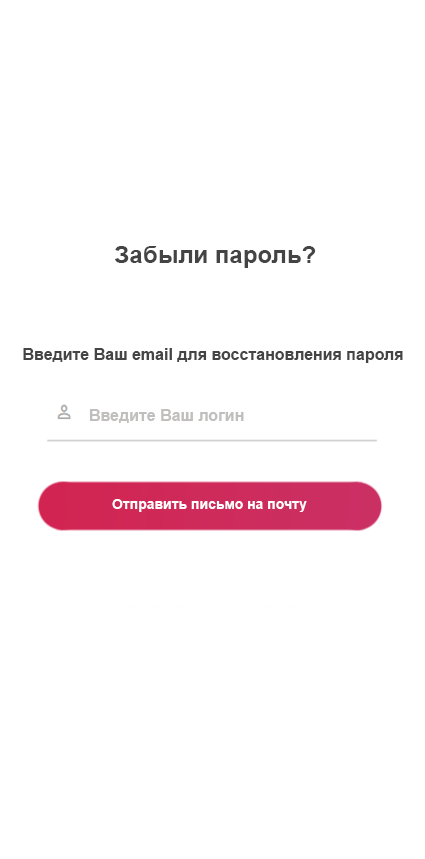
<style>
.page{position:relative;width:425px;height:859px;background:#ffffff}
.page>*{position:absolute;margin:0}
.t1{font:24px "Arial-BoldMT";color:#444444}
.t2{font:16px "Arial-BoldMT";color:#444444}
.t3{font:14px "Arial-BoldMT";color:#ffffff}
</style>
<div class="page">
<p class="t1" style="left:115px;top:246px;width:201px;height:22px">Забыли пароль?</p>
<p class="t2" style="left:23px;top:348px;width:380px;height:15px">Введите Ваш email для восстановления пароля</p>
<p class="t3" style="left:112px;top:499px;width:195px;height:13px">Отправить письмо на почту</p>
</div>
